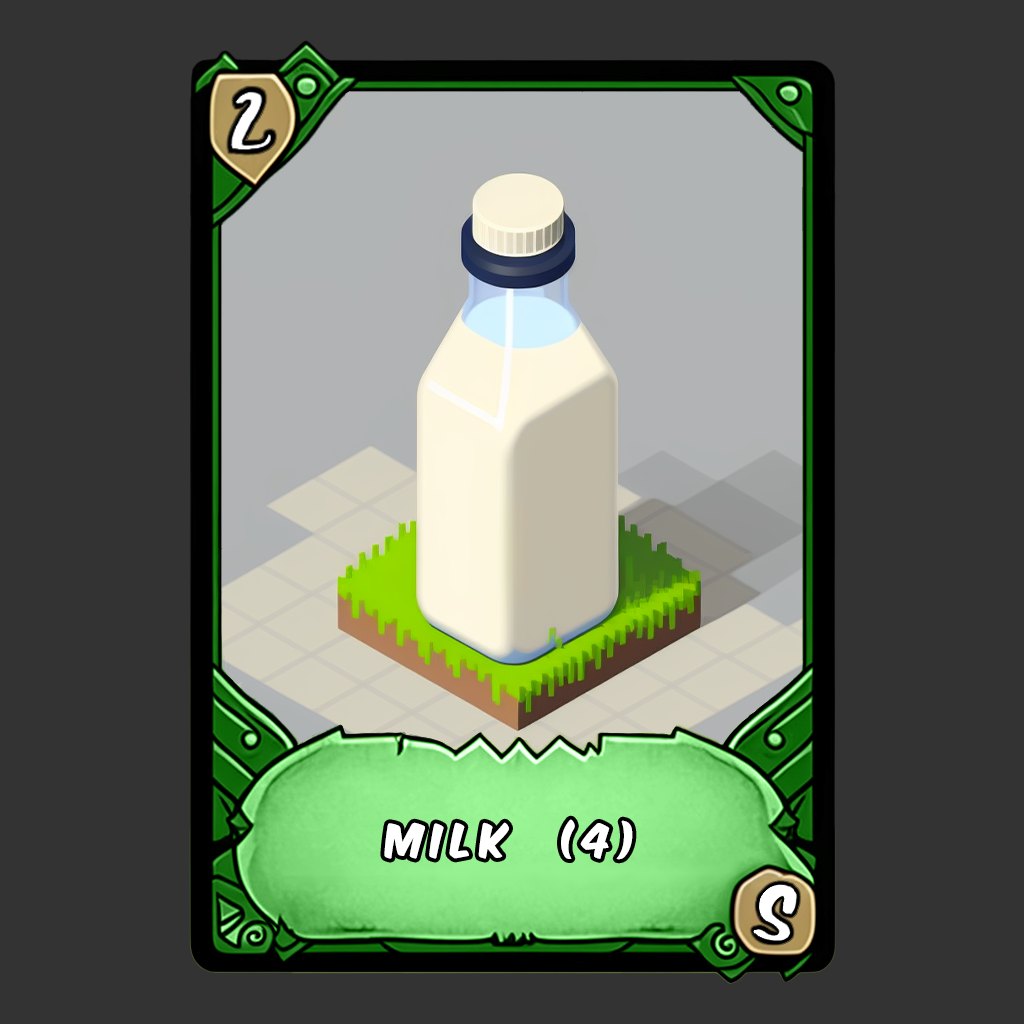
<style>
.page{position:relative;width:1024px;height:1024px;background:#333333}
.page>*{position:absolute;margin:0}
.t1{font:40px "KomikaAxis";letter-spacing:0.2em;color:#ffffff}
</style>
<div class="page">
<p class="t1" style="left:384px;top:819px;width:249px;height:41px">MILK  (4)</p>
</div>
